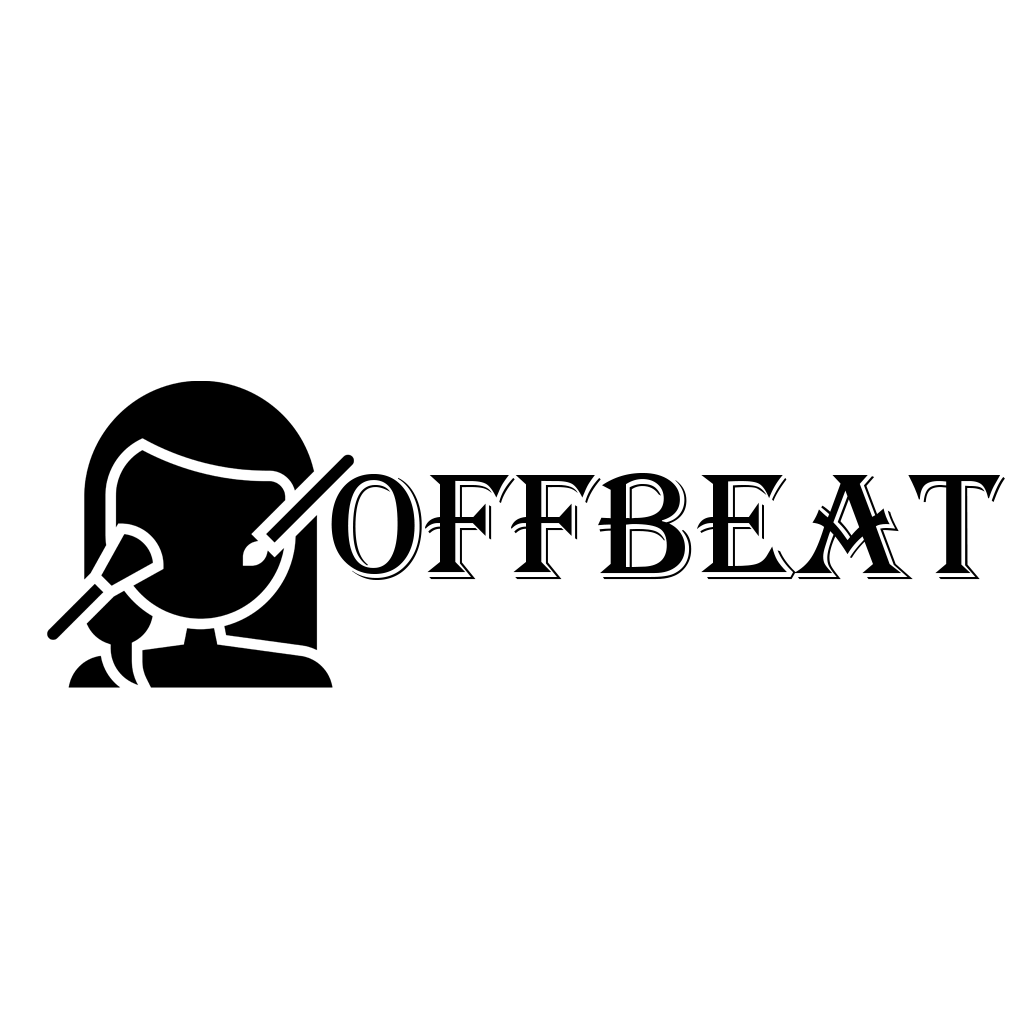
<style>
.page{position:relative;width:1024px;height:1024px;background:#ffffff}
.page>*{position:absolute;margin:0}
.t1{font:155.6px "Algerian";color:#010101}
</style>
<div class="page">
<p class="t1" style="left:331px;top:473px;width:674px;height:107px">OFFbeat</p>
</div>
